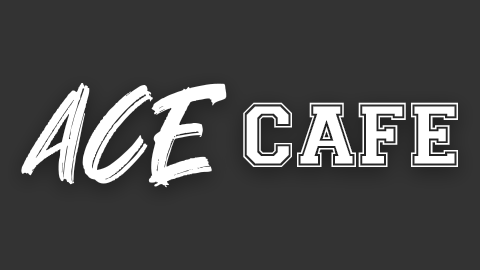
<style>
.page{position:relative;width:480px;height:270px;background:#333333}
.page>*{position:absolute;margin:0}
.t1{font:133.3px "Youth-Power";color:#ffffff}
.t2{font:91.7px "Varsity-Regular";color:#ffffff}
</style>
<div class="page">
<p class="t1" style="left:21px;top:82px;width:206px;height:106px">ACE</p>
<p class="t2" style="left:243px;top:102px;width:215px;height:65px">CAFE</p>
</div>
